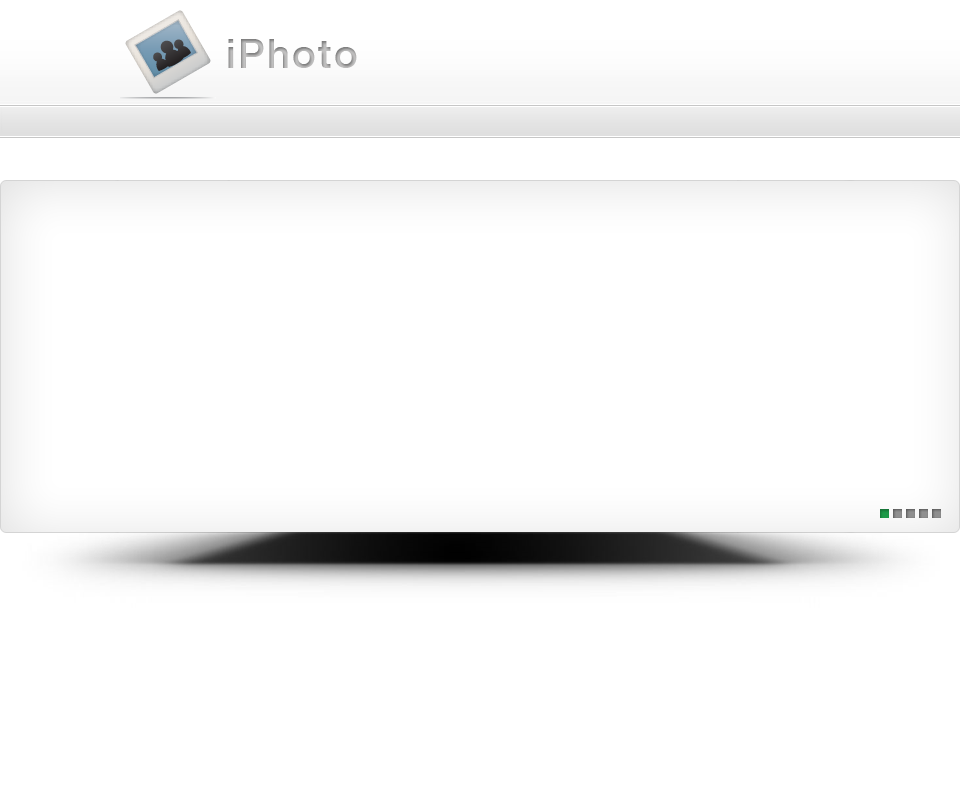
<style>
.page{position:relative;width:960px;height:800px;background:#ffffff}
.page>*{position:absolute;margin:0}
.t1{font:39.7px "HelveticaNeueLTCom-Md";letter-spacing:0.06em;color:#b1b1b1}
</style>
<div class="page">
<p class="t1" style="left:228px;top:39px;width:129px;height:29px">iPhoto</p>
</div>
